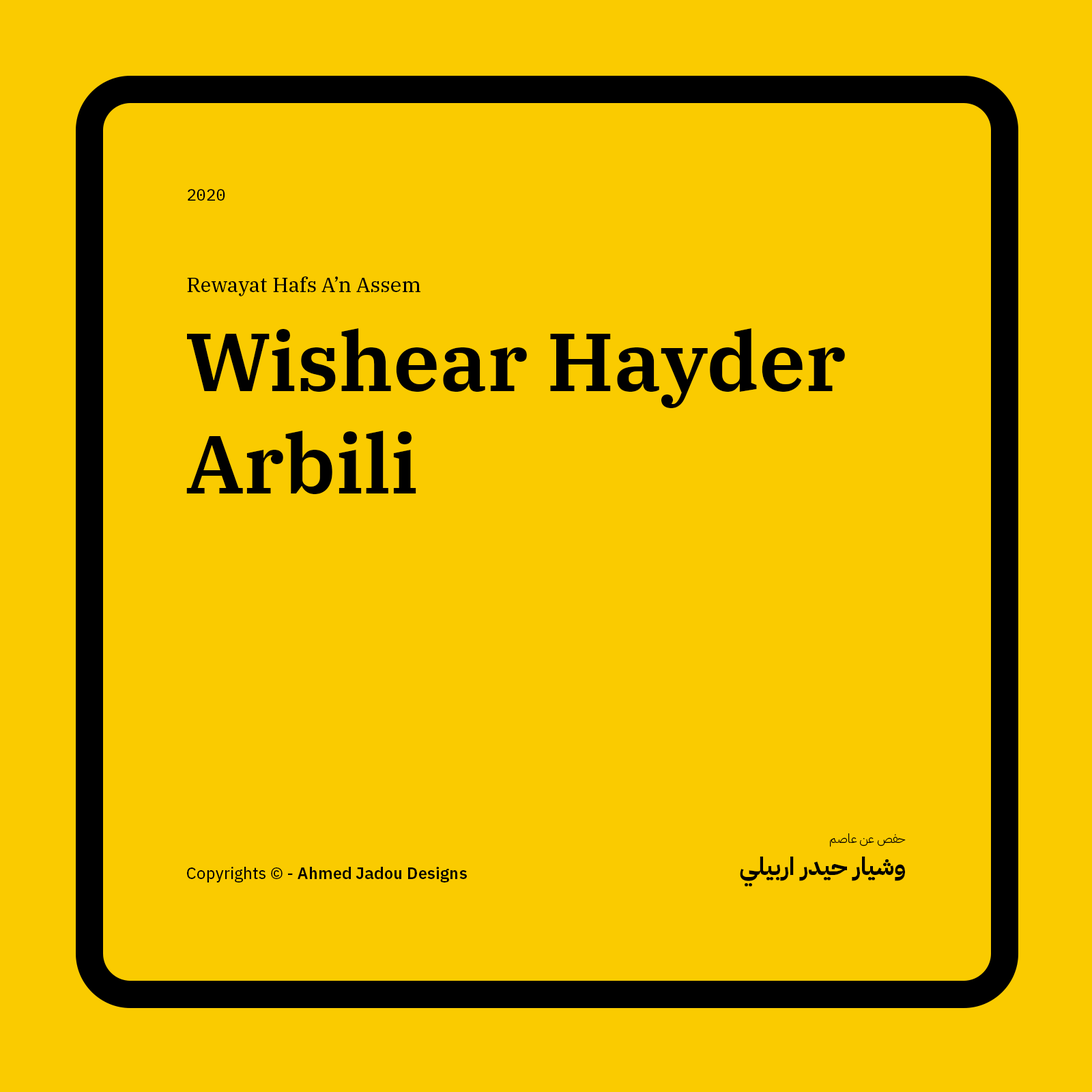
<style>
.page{position:relative;width:1092px;height:1092px;background:#facb00}
.page>*{position:absolute;margin:0}
.t1{font:16.4px "IBMPlexMono-Text";color:#000000}
.t2{font:20.5px "IBMPlexSerif-Text";color:#000000}
.t3{font:81.9px/102.7px "IBMPlexSerif-SemiBold";color:#000000}
.t4{font:12.3px "IBMPlexArabic-Light";color:#000000}
.t5{font:24.6px "IBMPlexArabic-Bold";color:#000000}
.t6{font:16.4px "IBMPlexSans-SemiBold";color:#000000}
.t7{font:16.4px "IBMPlexSans-Text";color:#000000}
</style>
<div class="page">
<p class="t1" style="left:188px;top:189px;width:37px;height:12px">2020</p>
<p class="t2" style="left:187px;top:276px;width:233px;height:20px">Rewayat Hafs A’n Assem</p>
<p class="t3" style="left:186px;top:328px;width:659px;height:166px">Wishear Hayder Arbili</p>
<p class="t4" style="left:830px;top:833px;width:76px;height:14px">حفص عن عاصم</p>
<p class="t5" style="left:740px;top:857px;width:165px;height:30px">وشيار حيدر اربيلي</p>
<p class="t6" style="left:187px;top:867px;width:280px;height:15px"><span class="t7">Copyrights © - </span>Ahmed Jadou Designs</p>
</div>
